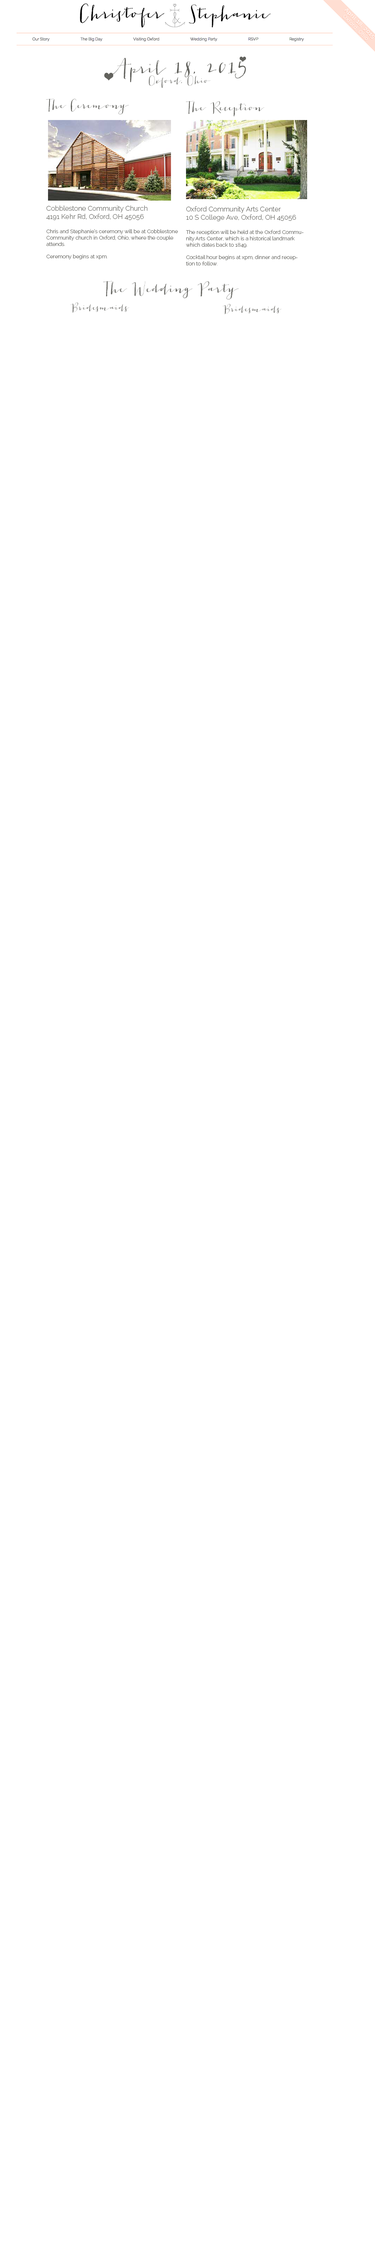
<style>
.page{position:relative;width:375px;height:2250px;background:#ffffff}
.page>*{position:absolute;margin:0}
.t1{font:18px "JacquesGilles";color:#62625d}
.t2{font:9px "JacquesGilles";color:#62625d}
.t3{font:11.2px "JacquesGilles";color:#62625d}
.t4{font:5.2px "Raleway-Light";color:#62625d}
.t5{font:6.8px "Raleway-Light";color:#62625d}
</style>
<div class="page">
<p class="t1" style="left:111px;top:58px;width:135px;height:30px;text-align:center">April 18, 2015<br><span class="t2">Oxford, Ohio</span></p>
<p class="t3" style="left:46px;top:99px;width:83px;height:15px">The Ceremony</p>
<p class="t3" style="left:186px;top:101px;width:78px;height:16px">The Reception</p>
<p class="t4" style="left:46px;top:206px;width:132px;height:54px"><span class="t5">Cobblestone Community Church<br>4191 Kehr Rd, Oxford, OH 45056<br><br></span>Chris and Stephanie’s ceremony will be at Cobblestone Community church in Oxford, Ohio, where the couple attends.<br><br>Ceremony begins at xpm.</p>
<p class="t4" style="left:186px;top:206px;width:118px;height:60px"><span class="t5">Oxford Community Arts Center<br>10 S College Ave, Oxford, OH 45056<br><br></span>The reception will be held at the Oxford Community Arts Center, which is a historical landmark which dates back to 1849. <br><br>Cocktail hour begins at xpm, dinner and reception to follow.</p>
<p class="t2" style="left:70px;top:302px;width:59px;height:11px">Bridesmaids</p>
<p class="t2" style="left:223px;top:304px;width:59px;height:10px">Bridesmaids</p>
</div>
